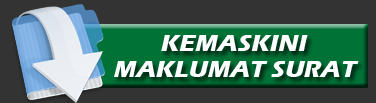
<style>
.page{position:relative;width:376px;height:103px;background:#333333}
.page>*{position:absolute;margin:0}
.t1{font:24px "ErasITC-Bold";letter-spacing:0.01em;color:#ffffff;font-style:italic}
</style>
<div class="page">
<p class="t1" style="left:161px;top:35px;width:147px;height:16px">KEMASKINI</p>
<p class="t1" style="left:114px;top:61px;width:245px;height:16px">MAKLUMAT SURAT</p>
</div>
